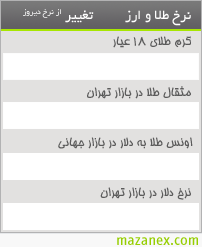
<style>
.page{position:relative;width:202px;height:247px;background:#ffffff}
.page>*{position:absolute;margin:0}
.t1{font:14.7px "BYekan";color:#ffffff}
.t2{font:13.3px "BHoma";color:#5b5b5b}
.t3{font:16px "InfoDispBook-Roman";color:#96ce01}
</style>
<div class="page">
<p class="t1" style="left:23px;top:9px;width:71px;height:14px">تغییر از نرخ دیروز</p>
<p class="t1" style="left:125px;top:10px;width:66px;height:16px">نرخ طلا و ارز</p>
<p class="t2" style="left:113px;top:36px;width:78px;height:12px">گرم طلای 18 عیار</p>
<p class="t2" style="left:87px;top:86px;width:104px;height:13px">مثقال طلا در بازار تهران</p>
<p class="t2" style="left:58px;top:137px;width:135px;height:12px">اونس طلا به دلار در بازار جهانی</p>
<p class="t2" style="left:100px;top:187px;width:91px;height:13px">نرخ دلار در بازار تهران</p>
<p class="t3" style="left:117px;top:237px;width:81px;height:8px">mazanex.com</p>
</div>
